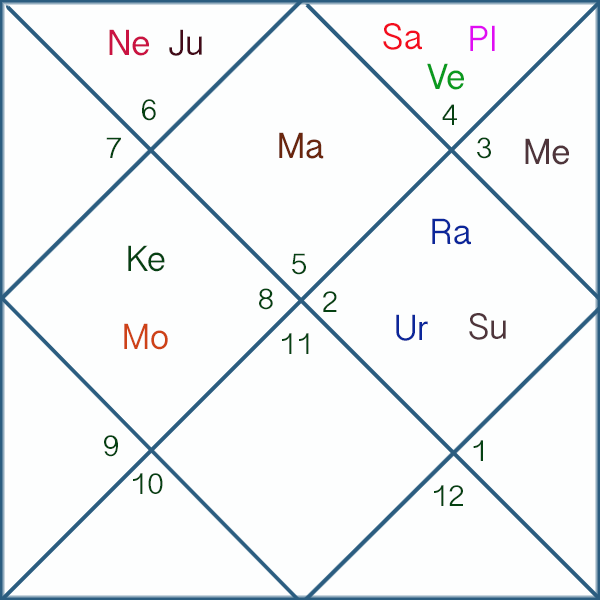
<style>
.page{position:relative;width:600px;height:600px;background:#fdfefe}
.page>*{position:absolute;margin:0}
.t1{font:36px "DevanagariSangamMN";color:#ca1342}
.t2{font:36px "DevanagariSangamMN";color:#430918}
.t3{font:36px "DevanagariSangamMN";color:#f30d1e}
.t4{font:36px "DevanagariSangamMN";color:#e00df3}
.t5{font:36px "DevanagariSangamMN";color:#0b9a1f}
.t6{font:30px "DevanagariSangamMN";color:#054112}
.t7{font:36px "DevanagariSangamMN";color:#6a260e}
.t8{font:36px "DevanagariSangamMN";color:#4f353b}
.t9{font:36px "DevanagariSangamMN";color:#0b269a}
.t10{font:36px "DevanagariSangamMN";color:#054112}
.t11{font:36px "DevanagariSangamMN";color:#ce4217}
</style>
<div class="page">
<p class="t1" style="left:109px;top:29px;width:40px;height:27px">Ne</p>
<p class="t2" style="left:169px;top:29px;width:33px;height:27px">Ju</p>
<p class="t3" style="left:383px;top:23px;width:39px;height:27px">Sa</p>
<p class="t4" style="left:470px;top:25px;width:25px;height:26px">Pl</p>
<p class="t5" style="left:427px;top:63px;width:37px;height:27px">Ve</p>
<p class="t6" style="left:142px;top:99px;width:14px;height:22px">6</p>
<p class="t6" style="left:442px;top:104px;width:15px;height:21px">4</p>
<p class="t6" style="left:106px;top:137px;width:15px;height:21px">7</p>
<p class="t7" style="left:279px;top:132px;width:45px;height:27px">Ma</p>
<p class="t6" style="left:477px;top:137px;width:14px;height:22px">3</p>
<p class="t8" style="left:525px;top:138px;width:44px;height:27px">Me</p>
<p class="t9" style="left:432px;top:218px;width:39px;height:27px">Ra</p>
<p class="t10" style="left:128px;top:245px;width:37px;height:27px">Ke</p>
<p class="t6" style="left:292px;top:253px;width:14px;height:22px">5</p>
<p class="t6" style="left:259px;top:288px;width:14px;height:22px">8</p>
<p class="t6" style="left:323px;top:291px;width:14px;height:21px">2</p>
<p class="t9" style="left:396px;top:314px;width:32px;height:27px">Ur</p>
<p class="t8" style="left:469px;top:313px;width:37px;height:27px">Su</p>
<p class="t11" style="left:124px;top:323px;width:44px;height:27px">Mo</p>
<p class="t6" style="left:282px;top:333px;width:27px;height:21px">11</p>
<p class="t6" style="left:104px;top:435px;width:14px;height:22px">9</p>
<p class="t6" style="left:473px;top:440px;width:10px;height:21px">1</p>
<p class="t6" style="left:133px;top:473px;width:30px;height:21px">10</p>
<p class="t6" style="left:434px;top:485px;width:29px;height:21px">12</p>
</div>
